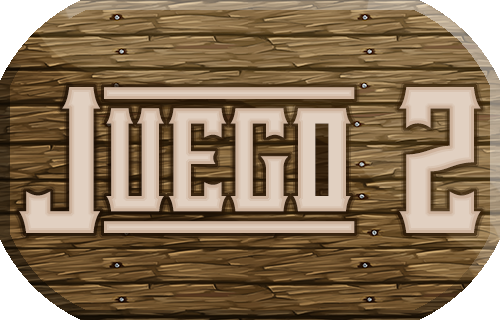
<style>
.page{position:relative;width:500px;height:320px}
.page>*{position:absolute;margin:0}
.t1{font:180px "VanillaWhale-Regular";color:#e1d0c1}
</style>
<div class="page">
<p class="t1" style="left:19px;top:87px;width:462px;height:146px">Juego 2</p>
</div>
